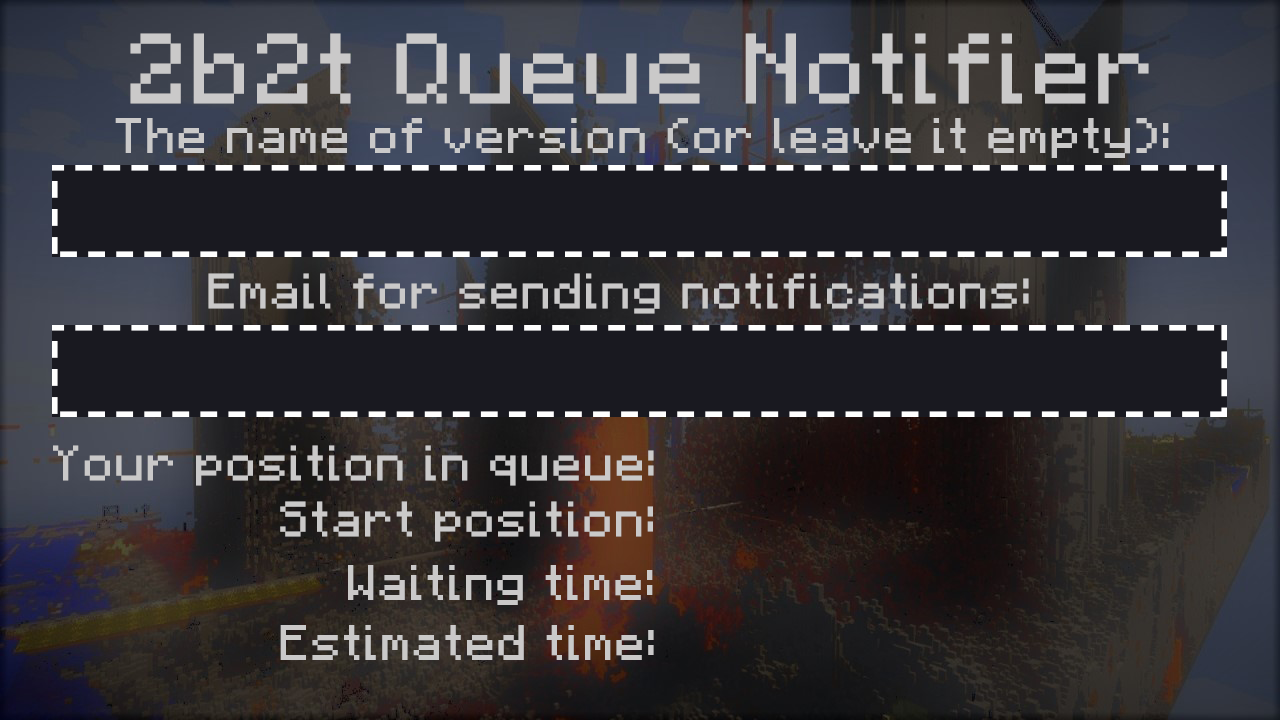
<style>
.page{position:relative;width:1280px;height:720px;background:#191920}
.page>*{position:absolute;margin:0}
.t1{font:80px "F77-Minecraft";letter-spacing:0.04em;color:#cac9c9}
.t2{font:40px "F77-Minecraft";letter-spacing:0.04em;color:#cac9c9}
</style>
<div class="page">
<p class="t1" style="left:130px;top:33px;width:1019px;height:71px">2b2t Queue Notifier</p>
<p class="t2" style="left:115px;top:118px;width:1054px;height:40px">The name of version (or leave it empty):</p>
<p class="t2" style="left:208px;top:273px;width:821px;height:41px">Email for sending notifications:</p>
<p class="t2" style="left:53px;top:445px;width:601px;height:41px">Your position in queue:</p>
<p class="t2" style="left:280px;top:501px;width:373px;height:41px">Start position:</p>
<p class="t2" style="left:348px;top:565px;width:305px;height:40px">Waiting time:</p>
<p class="t2" style="left:280px;top:625px;width:374px;height:35px">Estimated time:</p>
</div>
